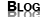
<style>
.page{position:relative;width:51px;height:17px;background:#ffffff}
.page>*{position:absolute;margin:0}
.t1{font:11px "HelveticaNeue-Bold";color:#000000}
.t2{font:14px "HelveticaNeue-Bold";color:#000000}
</style>
<div class="page">
<p class="t1" style="left:7px;top:1px;width:33px;height:10px"><span class="t2">B</span>LOG</p>
</div>
